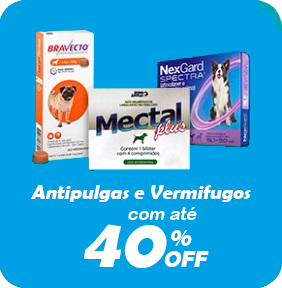
<style>
.page{position:relative;width:282px;height:288px;background:#00a1e4}
.page>*{position:absolute;margin:0}
.t1{font:20px "BerlinSansFBDemi-Bold";color:#ffffff;font-style:italic}
.t2{font:18px "ArialRoundedMTBold";color:#ffffff;font-style:italic}
.t3{font:70px "BerlinSansFBDemi-Bold";color:#ffffff;font-style:italic}
.t4{font:27px "BerlinSansFBDemi-Bold";color:#ffffff;font-style:italic}
.t5{font:23px "BerlinSansFBDemi-Bold";color:#ffffff;font-style:italic}
</style>
<div class="page">
<p class="t1" style="left:31px;top:185px;width:220px;height:17px">Antipulgas e Vermifugos</p>
<p class="t2" style="left:128px;top:207px;width:69px;height:13px">com até</p>
<p class="t3" style="left:84px;top:224px;width:83px;height:44px">40</p>
<p class="t4" style="left:171px;top:230px;width:21px;height:16px">%</p>
<p class="t5" style="left:164px;top:251px;width:45px;height:16px">OFF</p>
</div>
